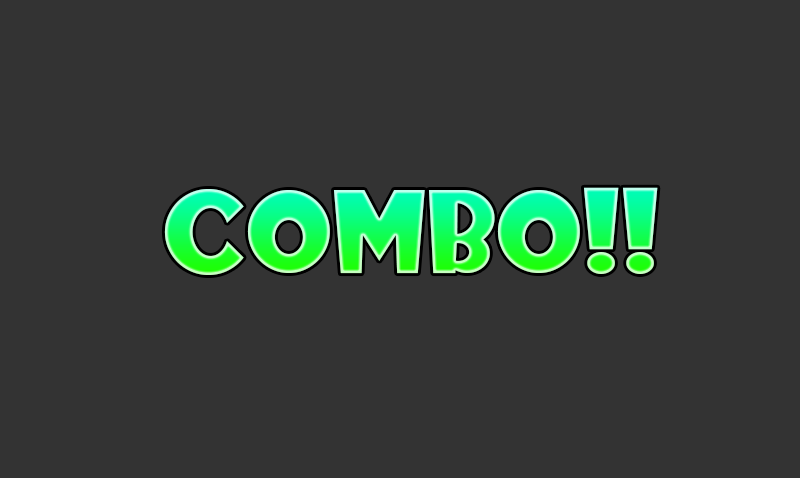
<style>
.page{position:relative;width:800px;height:478px;background:#333333}
.page>*{position:absolute;margin:0}
.t1{font:111.1px "BlitzkriegNF"}
</style>
<div class="page">
<p class="t1" style="left:164px;top:187px;width:494px;height:88px">COMBO!!</p>
</div>
